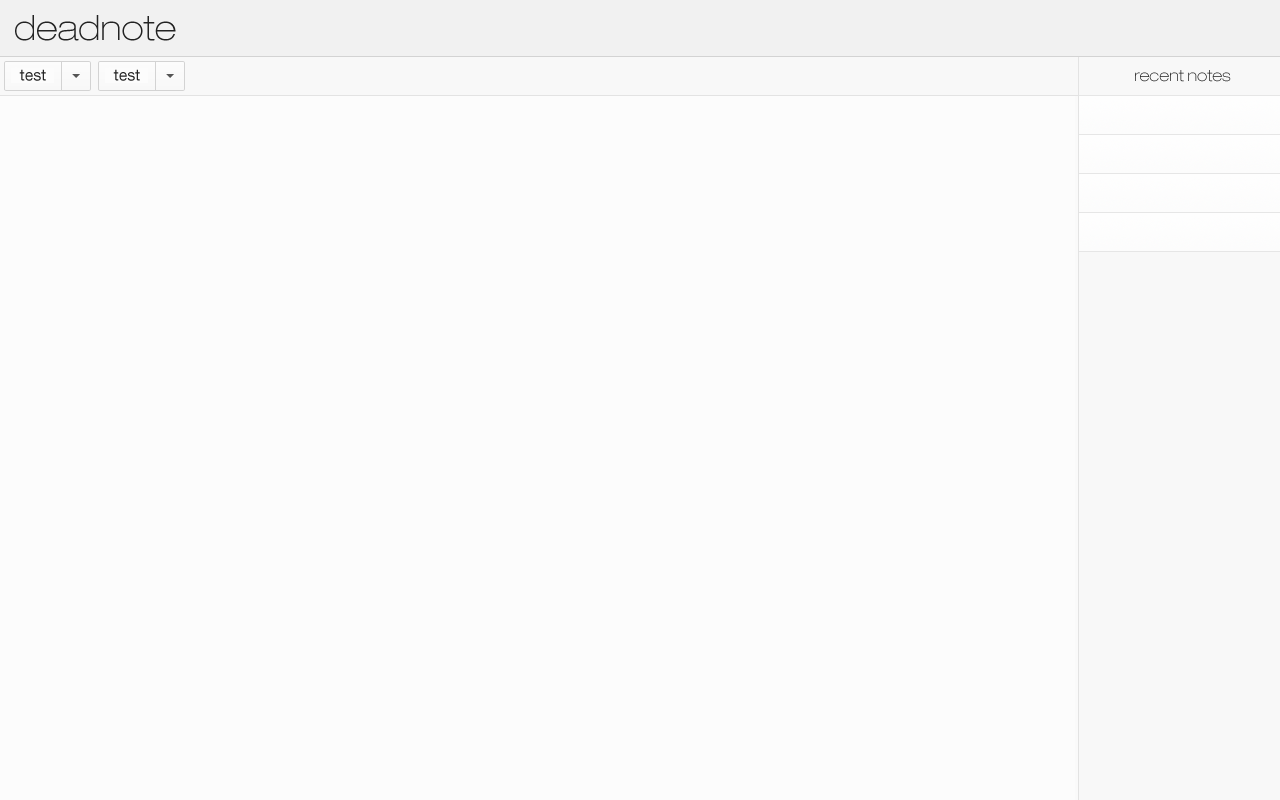
<style>
.page{position:relative;width:1280px;height:800px;background:#fcfcfc}
.page>*{position:absolute;margin:0}
.t1{font:35px "HelveticaNeueLTPro-ThEx";color:#232323}
.t2{font:16px "HelveticaNeueLTPro-ThEx"}
</style>
<div class="page">
<p class="t1" style="left:15px;top:15px;width:161px;height:26px">deadnote</p>
<p class="t2" style="left:1135px;top:70px;width:96px;height:12px">recent notes</p>
</div>
